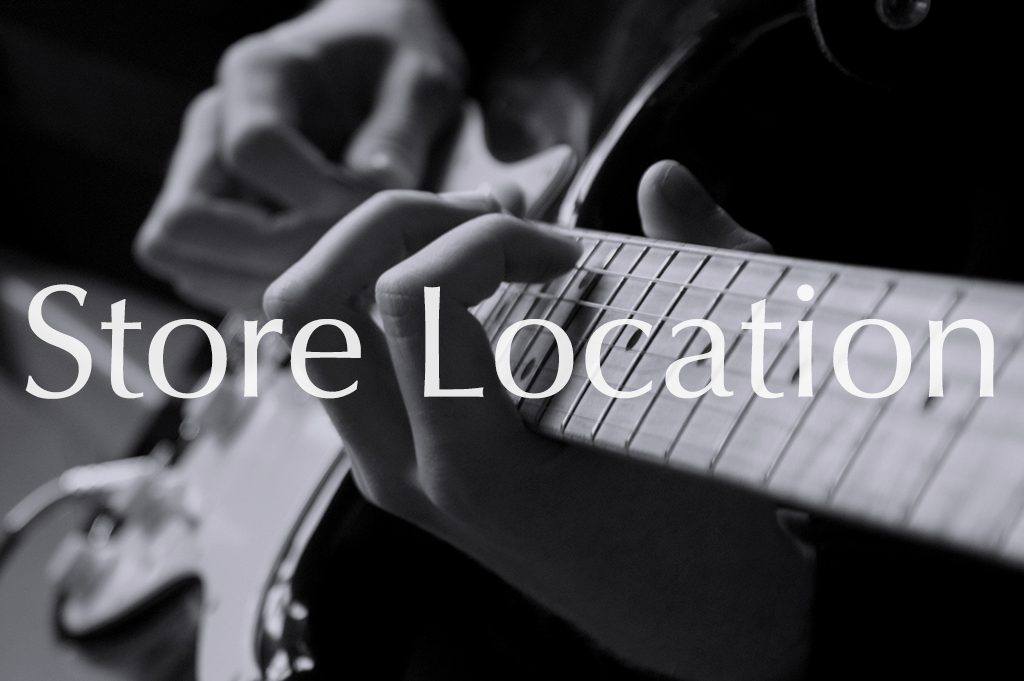
<style>
.page{position:relative;width:1024px;height:681px}
.page>*{position:absolute;margin:0}
.t1{font:160px "Optima-Regular";color:#ffffff}
</style>
<div class="page">
<p class="t1" style="left:25px;top:284px;width:969px;height:115px;opacity:0.85">Store Location</p>
</div>
